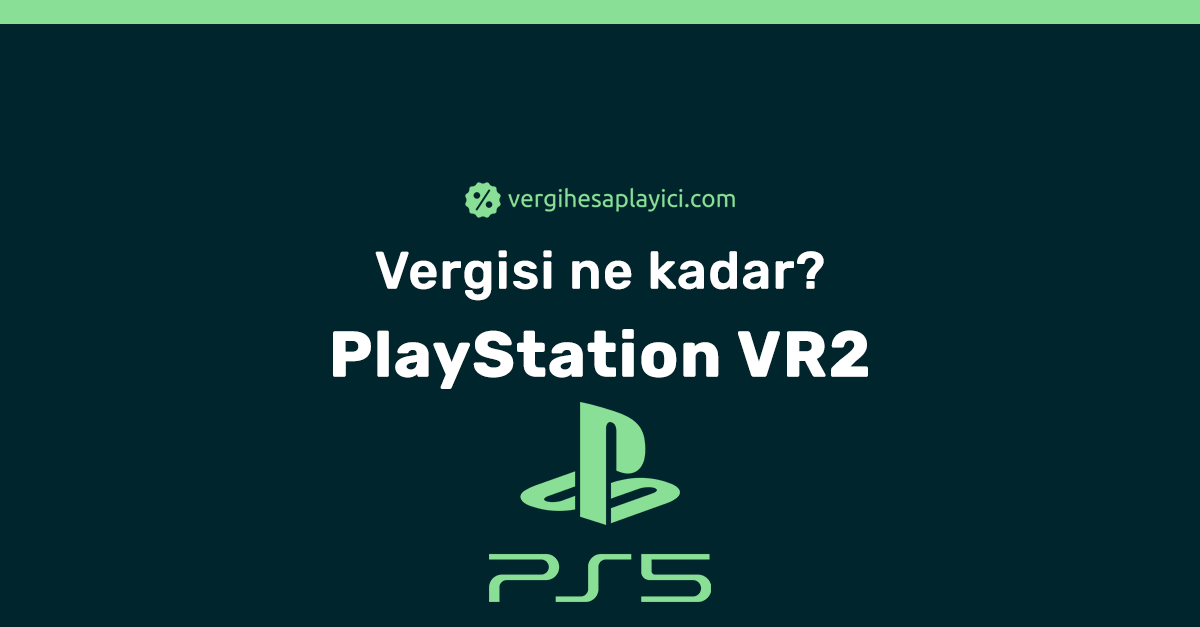
<style>
.page{position:relative;width:1200px;height:627px;background:#01252c}
.page>*{position:absolute;margin:0}
.t1{font:52px/88px "Rubik-Medium";color:#ffffff;font-weight:bold}
.t2{font:64px/88px "Rubik-Bold";color:#ffffff;font-weight:bold}
</style>
<div class="page">
<p class="t1" style="left:333px;top:250px;width:535px;height:139px;text-align:center">Vergisi ne kadar?<br><span class="t2">PlayStation VR2</span></p>
</div>
